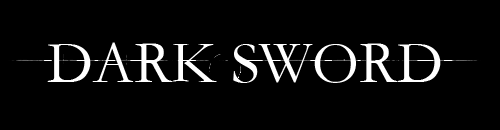
<style>
.page{position:relative;width:500px;height:130px;background:#000000}
.page>*{position:absolute;margin:0}
.t1{font:60px "STKaiti";color:#ffffff}
</style>
<div class="page">
<p class="t1" style="left:47px;top:42px;width:394px;height:41px">DARK SWORD</p>
</div>
